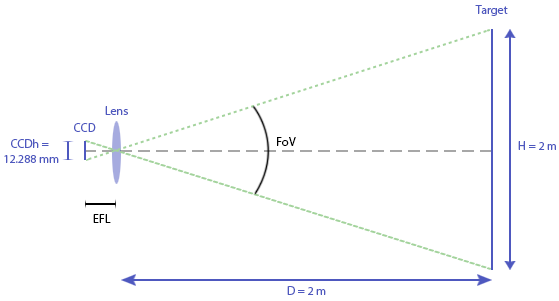
<style>
.page{position:relative;width:559px;height:301px;background:#ffffff}
.page>*{position:absolute;margin:0}
.t1{font:12px "MyriadPro-Regular";color:#4e58bf}
.t2{font:12px "MyriadPro-Regular";color:#000000}
</style>
<div class="page">
<p class="t1" style="left:475px;top:5px;width:33px;height:11px">Target</p>
<p class="t1" style="left:105px;top:106px;width:23px;height:9px">Lens</p>
<p class="t1" style="left:74px;top:123px;width:22px;height:9px">CCD</p>
<p class="t2" style="left:277px;top:137px;width:19px;height:9px">FoV</p>
<p class="t1" style="left:4px;top:139px;width:55px;height:24px;text-align:center">CCDh = <br>12.288 mm</p>
<p class="t1" style="left:518px;top:141px;width:38px;height:9px">H = 2 m</p>
<p class="t2" style="left:93px;top:214px;width:18px;height:9px">EFL</p>
<p class="t1" style="left:287px;top:286px;width:39px;height:9px">D = 2 m</p>
</div>
